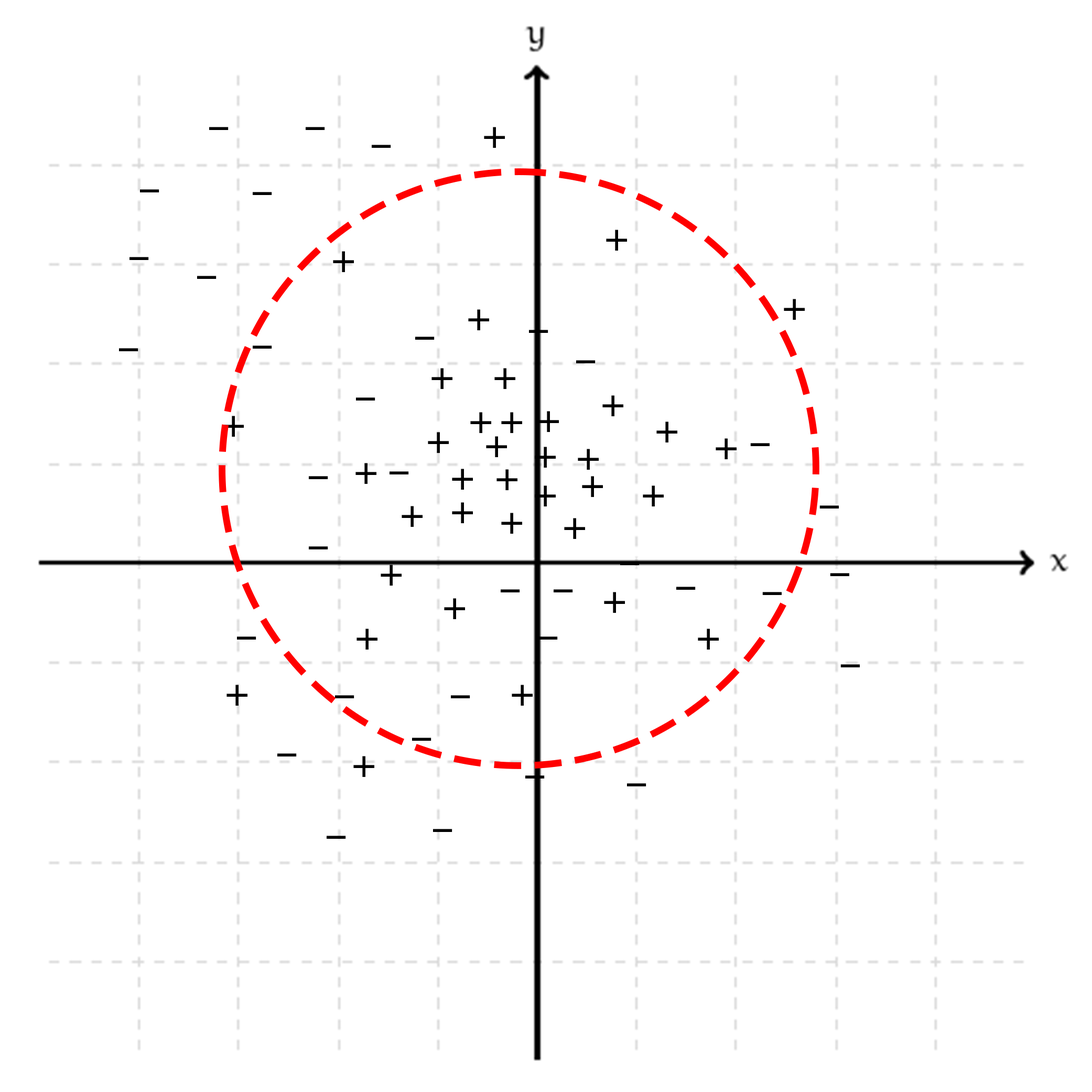
<style>
.page{position:relative;width:1092px;height:1092px;background:#ffffff}
.page>*{position:absolute;margin:0}
.t1{font:61.1px "VisbyCF-Regular";color:#000000}
</style>
<div class="page">
<p class="t1" style="left:209px;top:127px;width:20px;height:3px">-</p>
<p class="t1" style="left:306px;top:127px;width:19px;height:3px">-</p>
<p class="t1" style="left:484px;top:127px;width:21px;height:21px">+</p>
<p class="t1" style="left:372px;top:145px;width:19px;height:3px">-</p>
<p class="t1" style="left:140px;top:189px;width:19px;height:3px">-</p>
<p class="t1" style="left:253px;top:192px;width:19px;height:3px">-</p>
<p class="t1" style="left:606px;top:230px;width:22px;height:21px">+</p>
<p class="t1" style="left:129px;top:257px;width:20px;height:3px">-</p>
<p class="t1" style="left:333px;top:251px;width:21px;height:22px">+</p>
<p class="t1" style="left:197px;top:276px;width:20px;height:3px">-</p>
<p class="t1" style="left:784px;top:299px;width:21px;height:21px">+</p>
<p class="t1" style="left:468px;top:309px;width:22px;height:22px">+</p>
<p class="t1" style="left:529px;top:330px;width:19px;height:3px">-</p>
<p class="t1" style="left:415px;top:337px;width:20px;height:3px">-</p>
<p class="t1" style="left:119px;top:348px;width:19px;height:3px">-</p>
<p class="t1" style="left:253px;top:345px;width:19px;height:4px">-</p>
<p class="t1" style="left:576px;top:360px;width:20px;height:3px">-</p>
<p class="t1" style="left:431px;top:368px;width:22px;height:22px">+</p>
<p class="t1" style="left:494px;top:368px;width:22px;height:22px">+</p>
<p class="t1" style="left:356px;top:397px;width:19px;height:4px">-</p>
<p class="t1" style="left:602px;top:395px;width:22px;height:22px">+</p>
<p class="t1" style="left:470px;top:412px;width:22px;height:22px">+</p>
<p class="t1" style="left:501px;top:412px;width:22px;height:22px">+</p>
<p class="t1" style="left:538px;top:411px;width:21px;height:21px">+</p>
<p class="t1" style="left:223px;top:416px;width:21px;height:21px">+</p>
<p class="t1" style="left:656px;top:421px;width:22px;height:22px">+</p>
<p class="t1" style="left:428px;top:432px;width:21px;height:21px">+</p>
<p class="t1" style="left:486px;top:436px;width:21px;height:22px">+</p>
<p class="t1" style="left:535px;top:447px;width:21px;height:21px">+</p>
<p class="t1" style="left:578px;top:449px;width:21px;height:21px">+</p>
<p class="t1" style="left:716px;top:438px;width:21px;height:22px">+</p>
<p class="t1" style="left:750px;top:443px;width:20px;height:3px;rotate:180deg">-</p>
<p class="t1" style="left:355px;top:463px;width:22px;height:21px">+</p>
<p class="t1" style="left:390px;top:471px;width:19px;height:3px">-</p>
<p class="t1" style="left:452px;top:469px;width:21px;height:21px">+</p>
<p class="t1" style="left:496px;top:469px;width:22px;height:22px">+</p>
<p class="t1" style="left:309px;top:476px;width:19px;height:3px">-</p>
<p class="t1" style="left:535px;top:485px;width:21px;height:22px">+</p>
<p class="t1" style="left:582px;top:476px;width:21px;height:22px">+</p>
<p class="t1" style="left:643px;top:485px;width:21px;height:22px">+</p>
<p class="t1" style="left:402px;top:506px;width:21px;height:21px">+</p>
<p class="t1" style="left:452px;top:502px;width:21px;height:22px">+</p>
<p class="t1" style="left:819px;top:505px;width:20px;height:4px;rotate:180deg">-</p>
<p class="t1" style="left:501px;top:513px;width:22px;height:21px">+</p>
<p class="t1" style="left:564px;top:518px;width:22px;height:21px">+</p>
<p class="t1" style="left:309px;top:546px;width:19px;height:3px">-</p>
<p class="t1" style="left:381px;top:565px;width:21px;height:21px">+</p>
<p class="t1" style="left:620px;top:562px;width:20px;height:3px">-</p>
<p class="t1" style="left:830px;top:573px;width:19px;height:3px;rotate:180deg">-</p>
<p class="t1" style="left:501px;top:589px;width:19px;height:3px">-</p>
<p class="t1" style="left:554px;top:589px;width:19px;height:3px">-</p>
<p class="t1" style="left:604px;top:592px;width:21px;height:21px">+</p>
<p class="t1" style="left:676px;top:587px;width:20px;height:3px">-</p>
<p class="t1" style="left:762px;top:592px;width:20px;height:3px;rotate:180deg">-</p>
<p class="t1" style="left:444px;top:598px;width:22px;height:22px">+</p>
<p class="t1" style="left:356px;top:629px;width:22px;height:21px">+</p>
<p class="t1" style="left:698px;top:629px;width:21px;height:21px">+</p>
<p class="t1" style="left:237px;top:636px;width:19px;height:4px">-</p>
<p class="t1" style="left:538px;top:636px;width:20px;height:4px">-</p>
<p class="t1" style="left:840px;top:664px;width:20px;height:3px;rotate:180deg">-</p>
<p class="t1" style="left:226px;top:685px;width:22px;height:21px">+</p>
<p class="t1" style="left:512px;top:685px;width:21px;height:21px">+</p>
<p class="t1" style="left:335px;top:695px;width:19px;height:3px">-</p>
<p class="t1" style="left:451px;top:695px;width:19px;height:3px">-</p>
<p class="t1" style="left:412px;top:738px;width:19px;height:3px">-</p>
<p class="t1" style="left:277px;top:753px;width:20px;height:3px">-</p>
<p class="t1" style="left:353px;top:756px;width:22px;height:21px">+</p>
<p class="t1" style="left:525px;top:775px;width:20px;height:3px">-</p>
<p class="t1" style="left:627px;top:783px;width:19px;height:3px">-</p>
<p class="t1" style="left:433px;top:829px;width:19px;height:3px">-</p>
<p class="t1" style="left:327px;top:836px;width:19px;height:3px">-</p>
</div>
